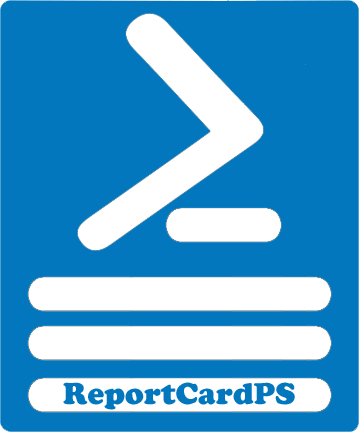
<style>
.page{position:relative;width:359px;height:432px;background:#0277bd}
.page>*{position:absolute;margin:0}
.t1{font:30px "CooperBlackStd";color:#0277bd}
</style>
<div class="page">
<p class="t1" style="left:63px;top:382px;width:232px;height:28px">ReportCardPS</p>
</div>
